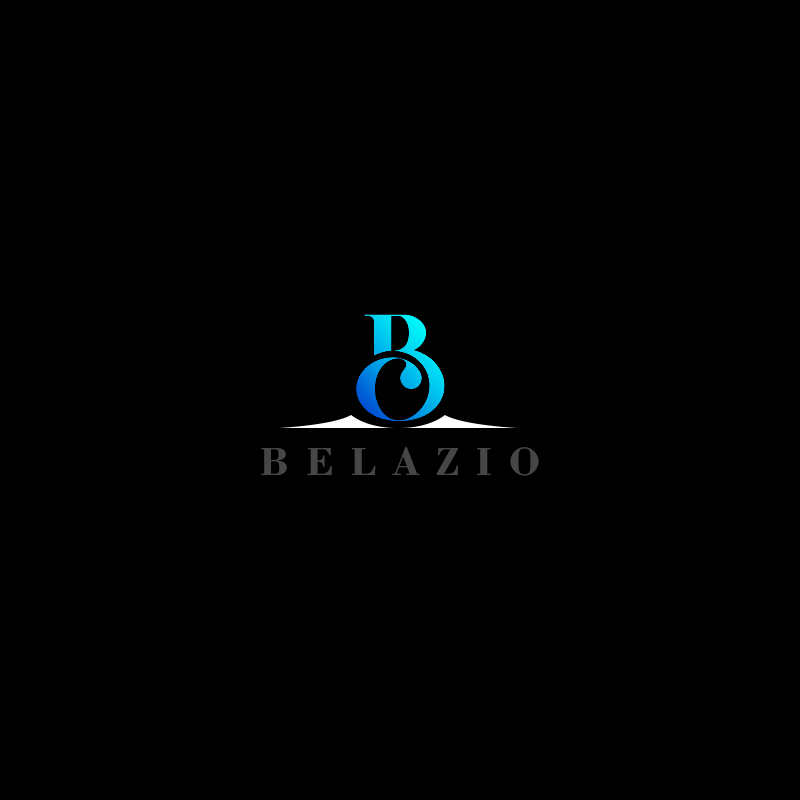
<style>
.page{position:relative;width:800px;height:800px;background:#000000}
.page>*{position:absolute;margin:0}
.t1{font:41.7px "BodoniBT-Bold";letter-spacing:0.4em;color:#474747;text-transform:uppercase}
</style>
<div class="page">
<p class="t1" style="left:261px;top:447px;width:278px;height:29px">belazio</p>
</div>
